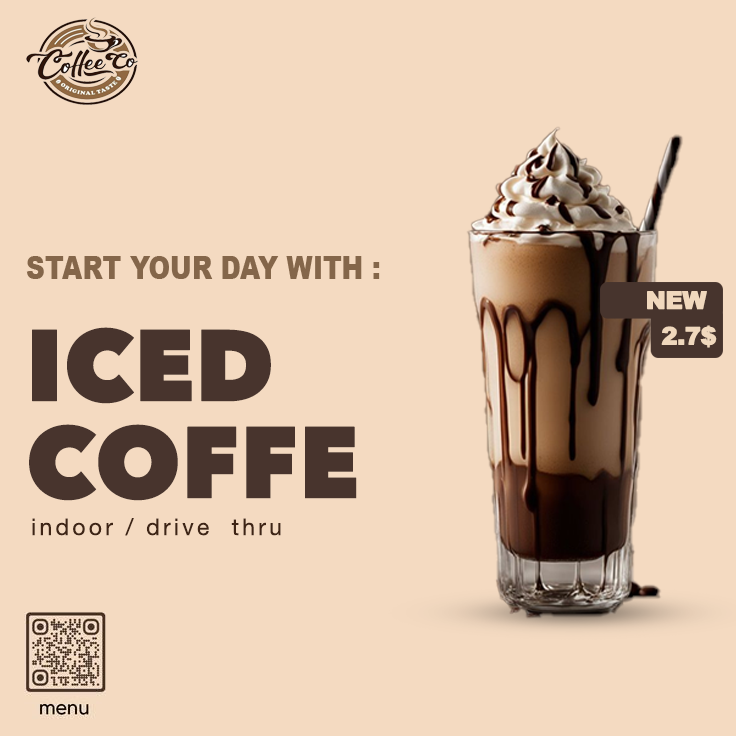
<style>
.page{position:relative;width:736px;height:736px;background:#f4dac1}
.page>*{position:absolute;margin:0}
.t1{font:24px "Arial-Black";letter-spacing:-0.04em;color:#f0d8bd;font-weight:bold}
.t2{font:100px/97px "AvenirNext-Heavy";letter-spacing:-0.02em;color:#48342d;font-weight:bold}
.t3{font:23px "HelveticaNeue";letter-spacing:0.14em;color:#3e2415}
</style>
<div class="page">
<p class="t1" style="left:647px;top:291px;width:60px;height:19px">NEW</p>
<p class="t2" style="left:29px;top:327px;width:328px;height:174px">ICED<br>COFFEE</p>
<p class="t1" style="left:661px;top:325px;width:56px;height:23px">2.7$</p>
<p class="t3" style="left:32px;top:518px;width:249px;height:18px">indoor / drive  thru</p>
</div>
